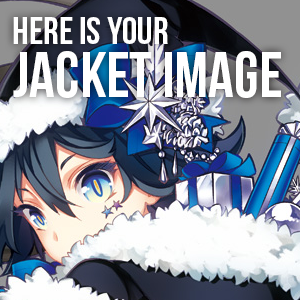
<style>
.page{position:relative;width:300px;height:300px}
.page>*{position:absolute;margin:0}
.t1{font:38.5px "BebasNeue";color:#ffffff}
.t2{font:64.1px "BebasNeue";color:#ffffff}
</style>
<div class="page">
<p class="t1" style="left:13px;top:17px;width:155px;height:27px">HERE IS YOUR</p>
<p class="t2" style="left:13px;top:51px;width:268px;height:47px">JACKET IMAGE</p>
</div>
